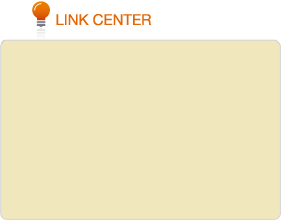
<style>
.page{position:relative;width:281px;height:220px;background:#f1e7bd}
.page>*{position:absolute;margin:0}
.t1{font:15px "HelveticaNeueLTStd-Roman";color:#e36704}
</style>
<div class="page">
<p class="t1" style="left:56px;top:14px;width:95px;height:12px">LINK CENTER</p>
</div>
